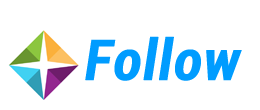
<style>
.page{position:relative;width:260px;height:110px;background:#ffffff}
.page>*{position:absolute;margin:0}
.t1{font:55.9px "Roboto-BoldCondensedItalic";color:#009cff;font-weight:bold}
</style>
<div class="page">
<p class="t1" style="left:85px;top:36px;width:157px;height:45px">Follow</p>
</div>
